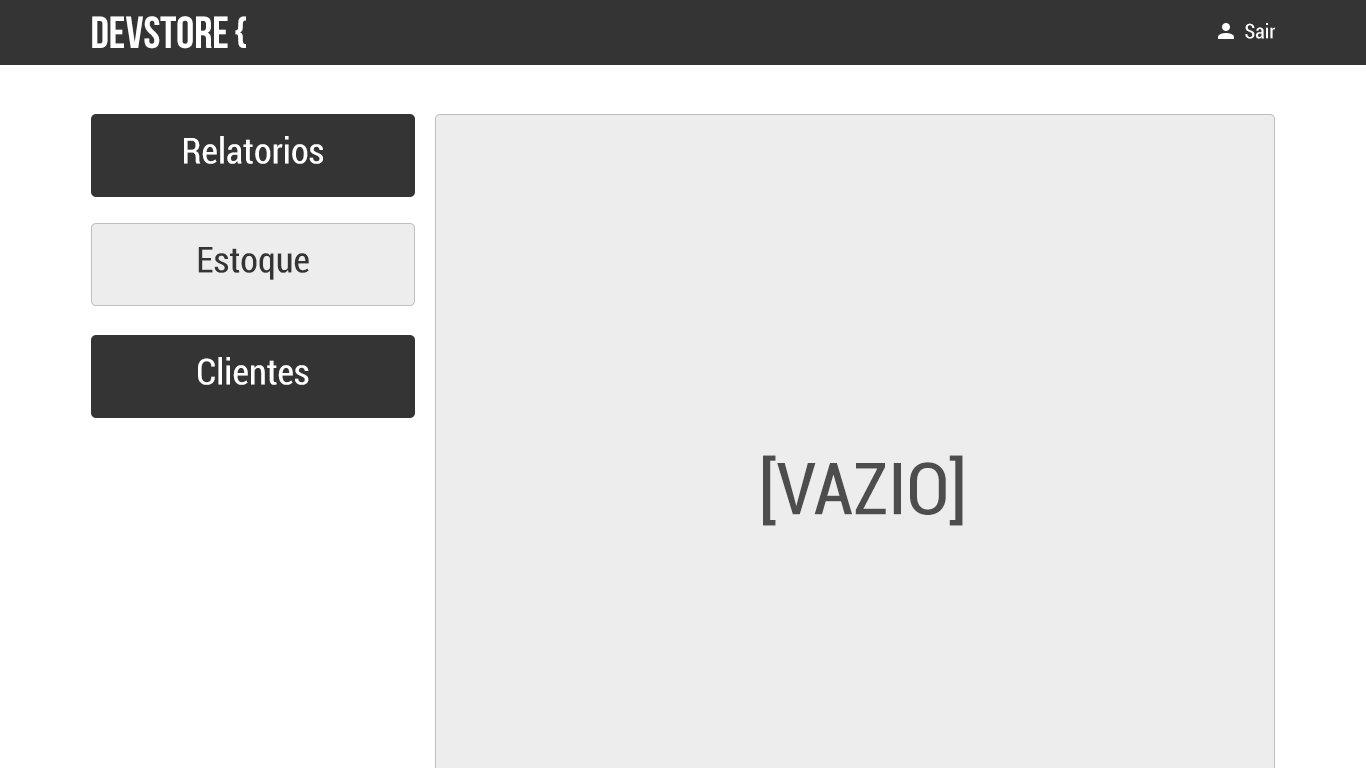
<style>
.page{position:relative;width:1366px;height:768px;background:#ededed}
.page>*{position:absolute;margin:0}
.t1{font:45px "BebasNeue";color:#ffffff;text-transform:uppercase}
.t2{font:20px "Roboto-Condensed";color:#ffffff}
.t3{font:36px "Roboto-Condensed";color:#ffffff}
.t4{font:36px "Roboto-Condensed";color:#343434}
.t5{font:72px "Roboto-Condensed";color:#4d4d4d}
</style>
<div class="page">
<p class="t1" style="left:92px;top:16px;width:154px;height:33px">DEVSTORE {</p>
<p class="t2" style="left:1245px;top:23px;width:30px;height:16px">Sair</p>
<p class="t3" style="left:184px;top:136px;width:139px;height:28px">Relatorios</p>
<p class="t4" style="left:198px;top:247px;width:111px;height:33px">Estoque</p>
<p class="t3" style="left:198px;top:357px;width:111px;height:28px">Clientes</p>
<p class="t5" style="left:763px;top:455px;width:200px;height:71px">[VAZIO]</p>
</div>
